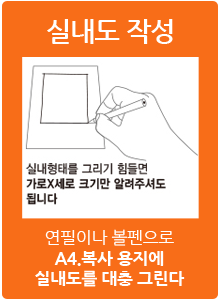
<style>
.page{position:relative;width:220px;height:300px;background:#f86d18}
.page>*{position:absolute;margin:0}
.t1{font:26.7px "NanumGothicBold";letter-spacing:-0.025em;color:#ffffff;text-transform:uppercase}
.t2{font:17.1px "NanumGothicExtraBold";letter-spacing:-0.025em;color:#ffffff;text-transform:uppercase}
.t3{font:17.1px "NanumGothic";letter-spacing:-0.025em;color:#ffffff;text-transform:uppercase}
</style>
<div class="page">
<p class="t1" style="left:47px;top:19px;width:126px;height:25px">실내도 작성</p>
<p class="t2" style="left:35px;top:229px;width:150px;height:58px;text-align:center"><span class="t3">연필이나 볼펜으로<br></span>A4.복사 용지에<br>실내도를 대충 그린다</p>
</div>
